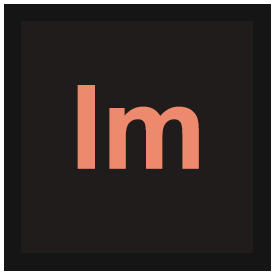
<style>
.page{position:relative;width:275px;height:275px;background:#211c1c}
.page>*{position:absolute;margin:0}
.t1{font:116.7px "Arial-BoldMT";color:#ed8a6d}
</style>
<div class="page">
<p class="t1" style="left:77px;top:85px;width:122px;height:84px">Im</p>
</div>
